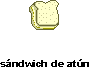
<style>
.page{position:relative;width:89px;height:67px;background:#ffffff}
.page>*{position:absolute;margin:0}
.t1{font:10.3px "Arial-BoldMT";color:#000000;scale:1.11 1}
</style>
<div class="page">
<p class="t1" style="left:0px;top:59px;width:89px;height:8px">sándwich de atún</p>
</div>
